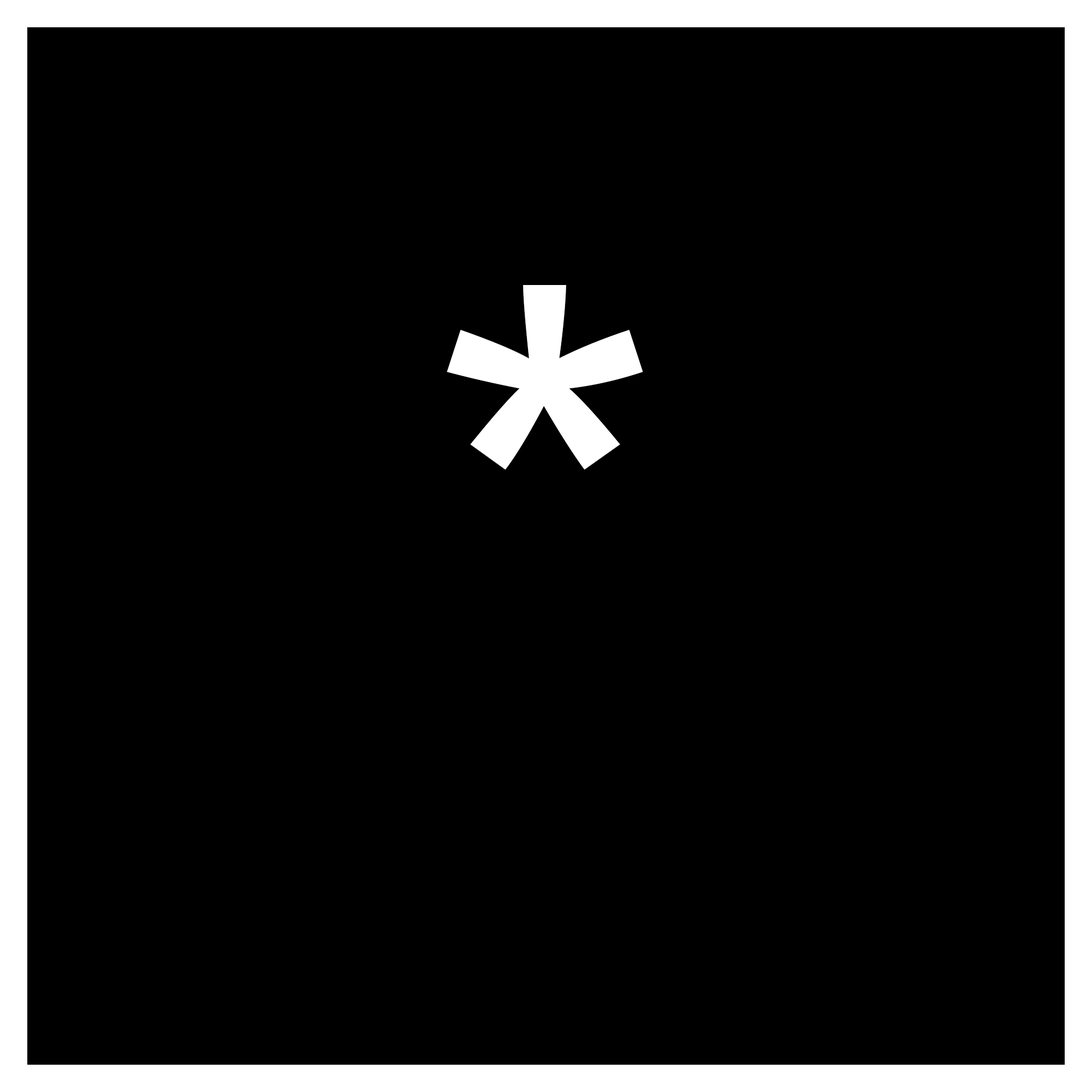
<style>
.page{position:relative;width:1092px;height:1092px;background:#000000}
.page>*{position:absolute;margin:0}
.t1{font:606.7px "ArialMT";color:#ffffff}
</style>
<div class="page">
<p class="t1" style="left:447px;top:285px;width:196px;height:185px">*</p>
</div>
